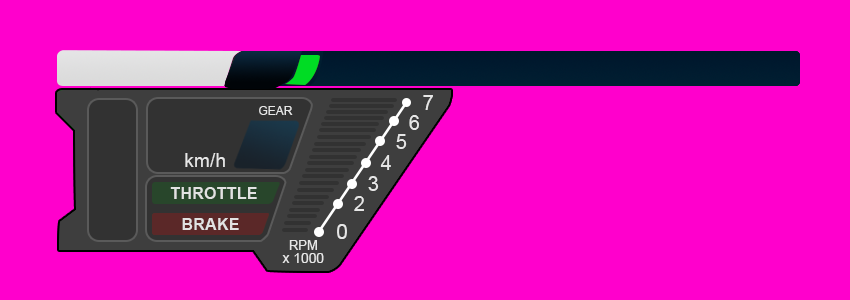
<style>
.page{position:relative;width:850px;height:300px;background:#ff00cc}
.page>*{position:absolute;margin:0}
.t1{font:19.6px "ArialMT";color:#e6e6e6}
.t2{font:12px "ArialMT";color:#e6e6e6}
.t3{font:19.3px "ArialMT";color:#e6e6e6}
.t4{font:16.3px "Arial-BoldMT";color:#e2e2e2}
.t5{font:20.6px "ArialMT";color:#e6e6e6}
.t6{font:12.9px "ArialMT";color:#e6e6e6}
.t7{font:13.8px "ArialMT";color:#e6e6e6}
</style>
<div class="page">
<p class="t1" style="left:423px;top:95px;width:10px;height:15px">7</p>
<p class="t2" style="left:259px;top:106px;width:34px;height:9px">GEAR</p>
<p class="t1" style="left:409px;top:115px;width:10px;height:15px">6</p>
<p class="t1" style="left:396px;top:134px;width:11px;height:15px">5</p>
<p class="t3" style="left:185px;top:153px;width:40px;height:14px">km/h</p>
<p class="t1" style="left:380px;top:155px;width:11px;height:15px">4</p>
<p class="t1" style="left:368px;top:176px;width:11px;height:15px">3</p>
<p class="t4" style="left:170px;top:187px;width:87px;height:12px">THROTTLE</p>
<p class="t1" style="left:354px;top:196px;width:10px;height:15px">2</p>
<p class="t4" style="left:182px;top:218px;width:57px;height:12px">BRAKE</p>
<p class="t5" style="left:337px;top:224px;width:10px;height:15px">0</p>
<p class="t6" style="left:289px;top:240px;width:28px;height:10px">RPM</p>
<p class="t7" style="left:282px;top:253px;width:42px;height:10px">x 1000</p>
</div>
